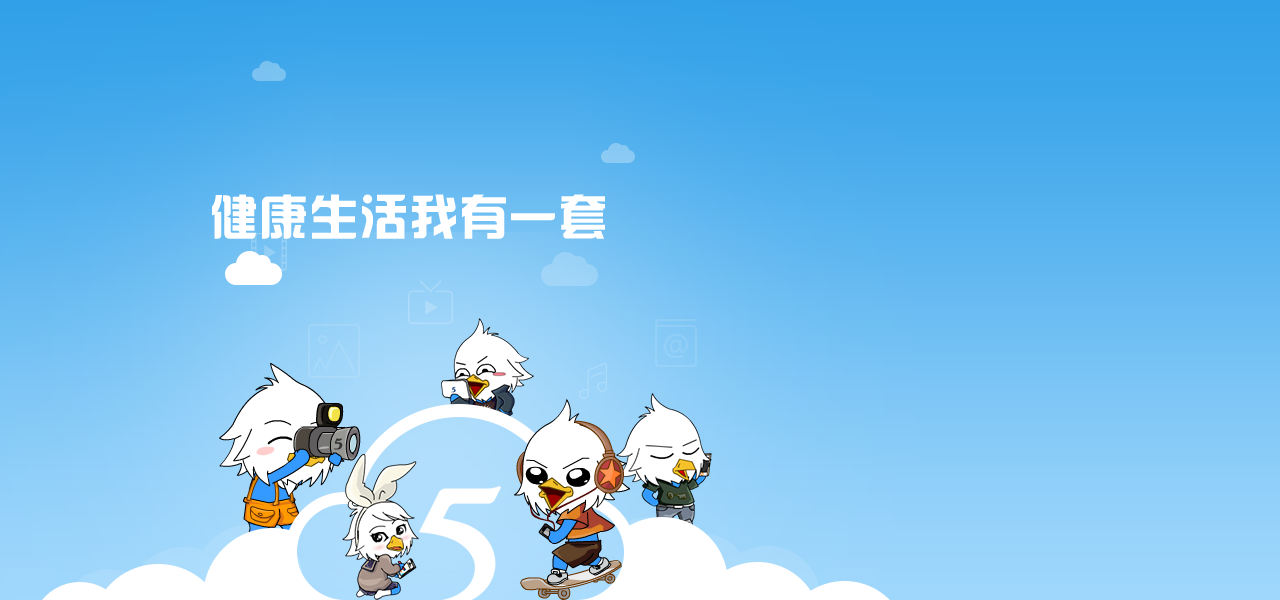
<style>
.page{position:relative;width:1280px;height:600px}
.page>*{position:absolute;margin:0}
.t1{font:48px "¹ã½Ý¾ÓÃÔÄã×Ö¿â";letter-spacing:0.04em;color:#ffffff}
</style>
<div class="page">
<p class="t1" style="left:212px;top:194px;width:393px;height:45px">健康生活我有一套</p>
</div>
